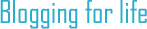
<style>
.page{position:relative;width:147px;height:29px;background:#ffffff}
.page>*{position:absolute;margin:0}
.t1{font:30px "AgencyFB-Reg";color:#29aece}
</style>
<div class="page">
<p class="t1" style="left:0px;top:0px;width:147px;height:29px">Blogging for life</p>
</div>
